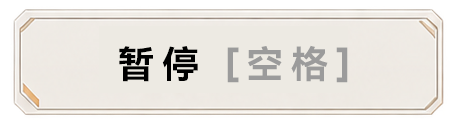
<style>
.page{position:relative;width:450px;height:128px;background:#edeae3}
.page>*{position:absolute;margin:0}
.t1{font:37.5px "HarmonyOS_Sans_SC_Bold";letter-spacing:0.2em;color:#9b9b9b}
.t2{font:37.5px "HarmonyOS_Sans_SC_Bold";letter-spacing:0.2em;color:#000000}
</style>
<div class="page">
<p class="t1" style="left:119px;top:45px;width:229px;height:38px"><span class="t2">暂停 </span>[空格]</p>
</div>
